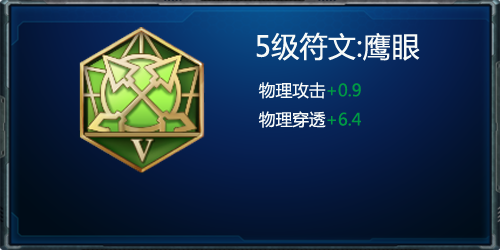
<style>
.page{position:relative;width:500px;height:250px}
.page>*{position:absolute;margin:0}
.t1{font:28.3px "MicrosoftYaHei";color:#f7faf8}
.t2{font:16.7px "MicrosoftYaHei";color:#f7faf8}
.t3{font:16.7px "MicrosoftYaHei";color:#009944}
</style>
<div class="page">
<p class="t1" style="left:256px;top:32px;width:164px;height:96px;text-align:center">5级符文:鹰眼<br><span class="t2">  物理攻击</span><span class="t3">+0.9<br></span><span class="t2">  物理穿透</span><span class="t3">+6.4</span></p>
</div>
